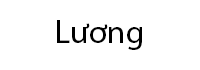
<style>
.page{position:relative;width:200px;height:70px;background:#ffffff}
.page>*{position:absolute;margin:0}
.t1{font:32.9px "MyriadPro-Regular";color:#000000}
</style>
<div class="page">
<p class="t1" style="left:57px;top:20px;width:85px;height:30px">Lương</p>
</div>
